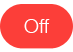
<style>
.page{position:relative;width:73px;height:52px;background:#fc3e39}
.page>*{position:absolute;margin:0}
.t1{font:20px "HelveticaNeue-Light";color:#ffffff}
</style>
<div class="page">
<p class="t1" style="left:24px;top:19px;width:26px;height:14px">Off</p>
</div>
